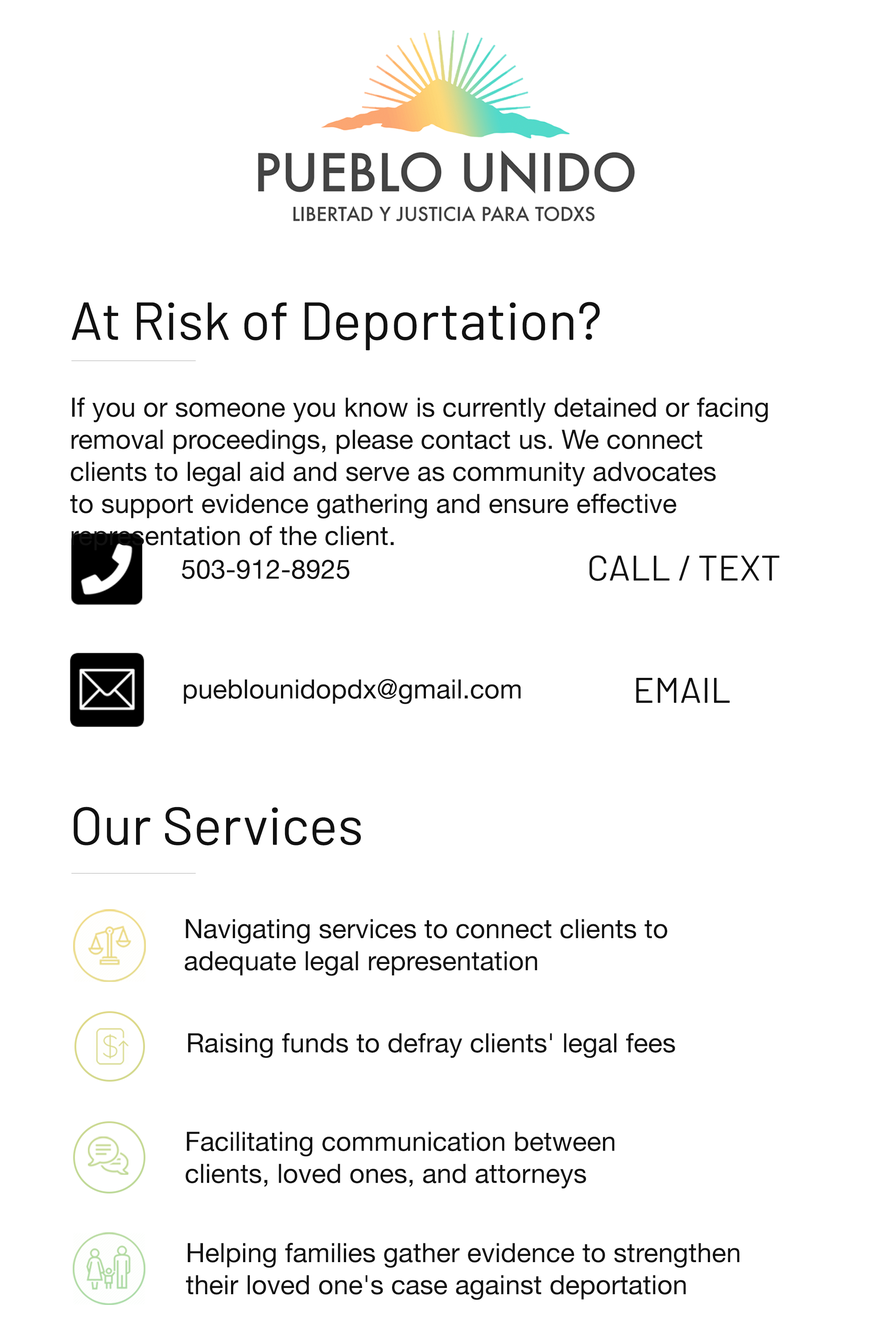
<style>
.page{position:relative;width:892px;height:1337px;background:#ffffff}
.page>*{position:absolute;margin:0}
.t1{font:53.5px "Barlow-Regular";color:#111111}
.t2{font:26.7px "HelveticaNeue";color:#111111}
.t3{font:35.7px "Barlow-Regular";color:#111111}
</style>
<div class="page">
<p class="t1" style="left:72px;top:302px;width:528px;height:48px">At Risk of Deportation?</p>
<p class="t2" style="left:70px;top:397px;width:698px;height:154px">If you or someone you know is currently detained or facing <br>removal proceedings, please contact us. We connect <br>clients to legal aid and serve as community advocates <br>to support evidence gathering and ensure effective <br>representation of the client.</p>
<p class="t3" style="left:589px;top:555px;width:190px;height:26px">CALL / TEXT</p>
<p class="t2" style="left:182px;top:560px;width:168px;height:20px">503-912-8925</p>
<p class="t2" style="left:184px;top:679px;width:337px;height:25px">pueblounidopdx@gmail.com</p>
<p class="t3" style="left:636px;top:678px;width:93px;height:25px">EMAIL</p>
<p class="t1" style="left:74px;top:807px;width:287px;height:39px">Our Services</p>
<p class="t2" style="left:185px;top:919px;width:482px;height:57px">Navigating services to connect clients to <br>adequate legal representation</p>
<p class="t2" style="left:188px;top:1033px;width:487px;height:25px">Raising funds to defray clients' legal fees</p>
<p class="t2" style="left:185px;top:1132px;width:429px;height:57px">Facilitating communication between <br>clients, loved ones, and attorneys</p>
<p class="t2" style="left:186px;top:1243px;width:553px;height:57px">Helping families gather evidence to strengthen <br>their loved one's case against deportation</p>
</div>
